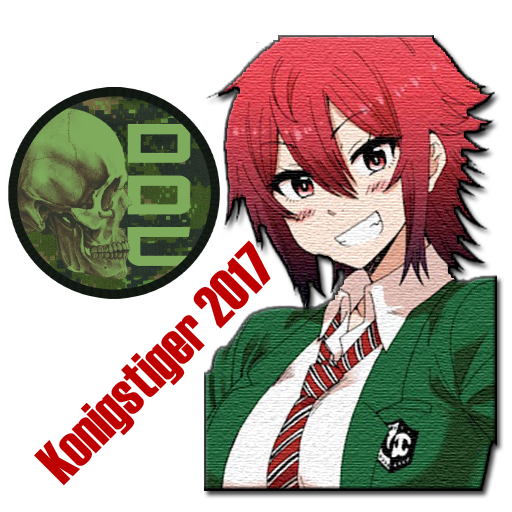
<style>
.page{position:relative;width:512px;height:512px;background:#ffffff}
.page>*{position:absolute;margin:0}
.t1{font:60px "Haettenschweiler";color:#be0000}
</style>
<div class="page">
<p class="t1" style="left:34px;top:240px;width:237px;height:246px;rotate:-45deg">Konigstiger 2017</p>
</div>
